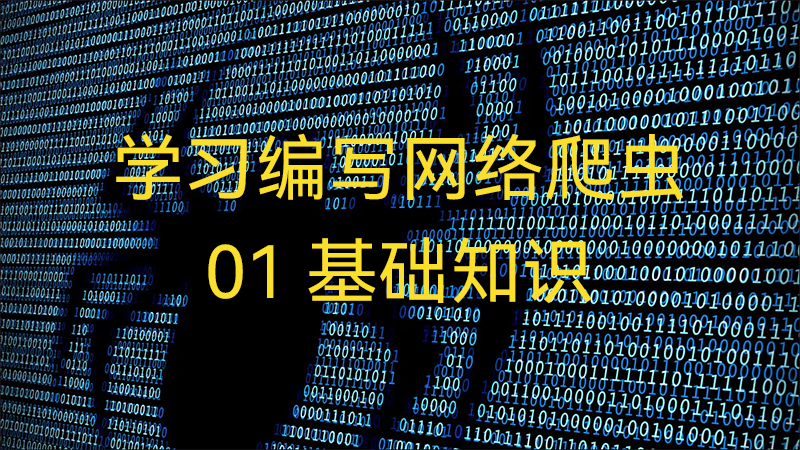
<style>
.page{position:relative;width:800px;height:450px;background:#000000}
.page>*{position:absolute;margin:0}
.t1{font:72px "HarmonyOS_Sans_SC";color:#fbdf2d}
</style>
<div class="page">
<p class="t1" style="left:116px;top:133px;width:567px;height:67px">学习编写网络爬虫</p>
<p class="t1" style="left:208px;top:237px;width:384px;height:67px">01 基础知识</p>
</div>
